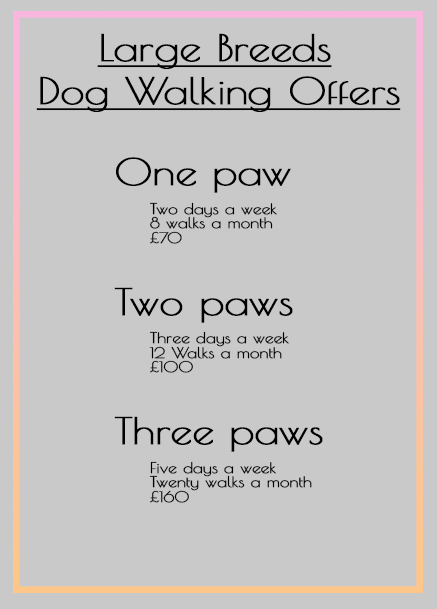
<style>
.page{position:relative;width:437px;height:609px;background:#c9c9c9}
.page>*{position:absolute;margin:0}
.t1{font:36.3px "PoiretOne-Regular";letter-spacing:-0.02em;color:#000000;font-weight:bold;text-decoration:underline;scale:1.19 1}
.t2{font:14.5px "PoiretOne-Regular";letter-spacing:-0.02em;color:#000000;font-weight:bold;scale:1.19 1}
.t3{font:36.3px "PoiretOne-Regular";letter-spacing:-0.02em;color:#000000;font-weight:bold;scale:1.19 1}
</style>
<div class="page">
<p class="t1" style="left:97px;top:33px;width:235px;height:36px">Large Breeds</p>
<p class="t1" style="left:36px;top:76px;width:365px;height:36px">Dog Walking Offers</p>
<p class="t2" style="left:114px;top:157px;width:209px;height:346px"><span class="t3">One paw<br></span><br> Two days a week <br> 8 walks a month<br> £70<br> <span class="t3"><br>Two paws<br></span> <br> Three days a week<br> 12 Walks a month<br> £100<br><span class="t3"><br>Three paws<br></span> <br> Five days a week<br> Twenty walks a month<br> £160</p>
</div>
